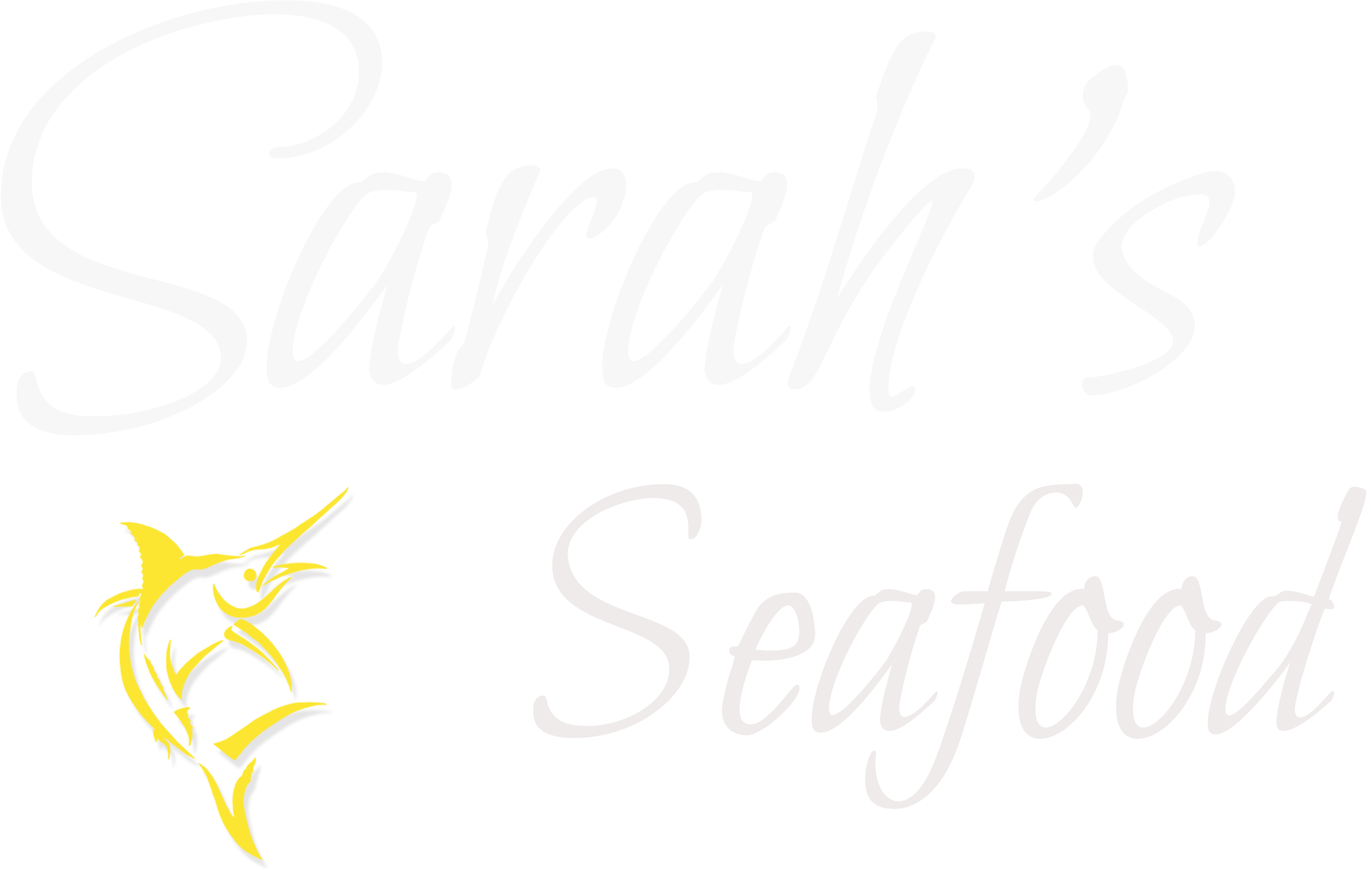
<style>
.page{position:relative;width:1371px;height:870px;background:#ffffff}
.page>*{position:absolute;margin:0}
.t1{font:560.3px "BilboSwashCaps-Regular";color:#f7f7f7}
.t2{font:373.5px "Bilbo-Regular";color:#efebeb}
</style>
<div class="page">
<p class="t1" style="left:1px;top:0px;width:1234px;height:435px">Sarah’s</p>
<p class="t2" style="left:533px;top:483px;width:833px;height:326px">Seafood</p>
</div>
